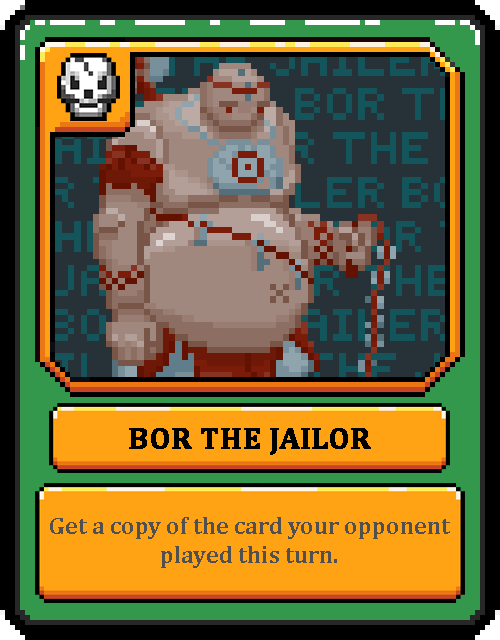
<style>
.page{position:relative;width:500px;height:640px}
.page>*{position:absolute;margin:0}
.t1{font:30px "Cambria-Bold";color:#000000;text-transform:uppercase;font-weight:bold}
.t2{font:24px "Cambria-Bold";color:#505050}
</style>
<div class="page">
<p class="t1" style="left:129px;top:428px;width:242px;height:27px">Bor the jailor</p>
<p class="t2" style="left:50px;top:517px;width:400px;height:51px;text-align:center">Get a copy of the card your opponent played this turn.</p>
</div>
